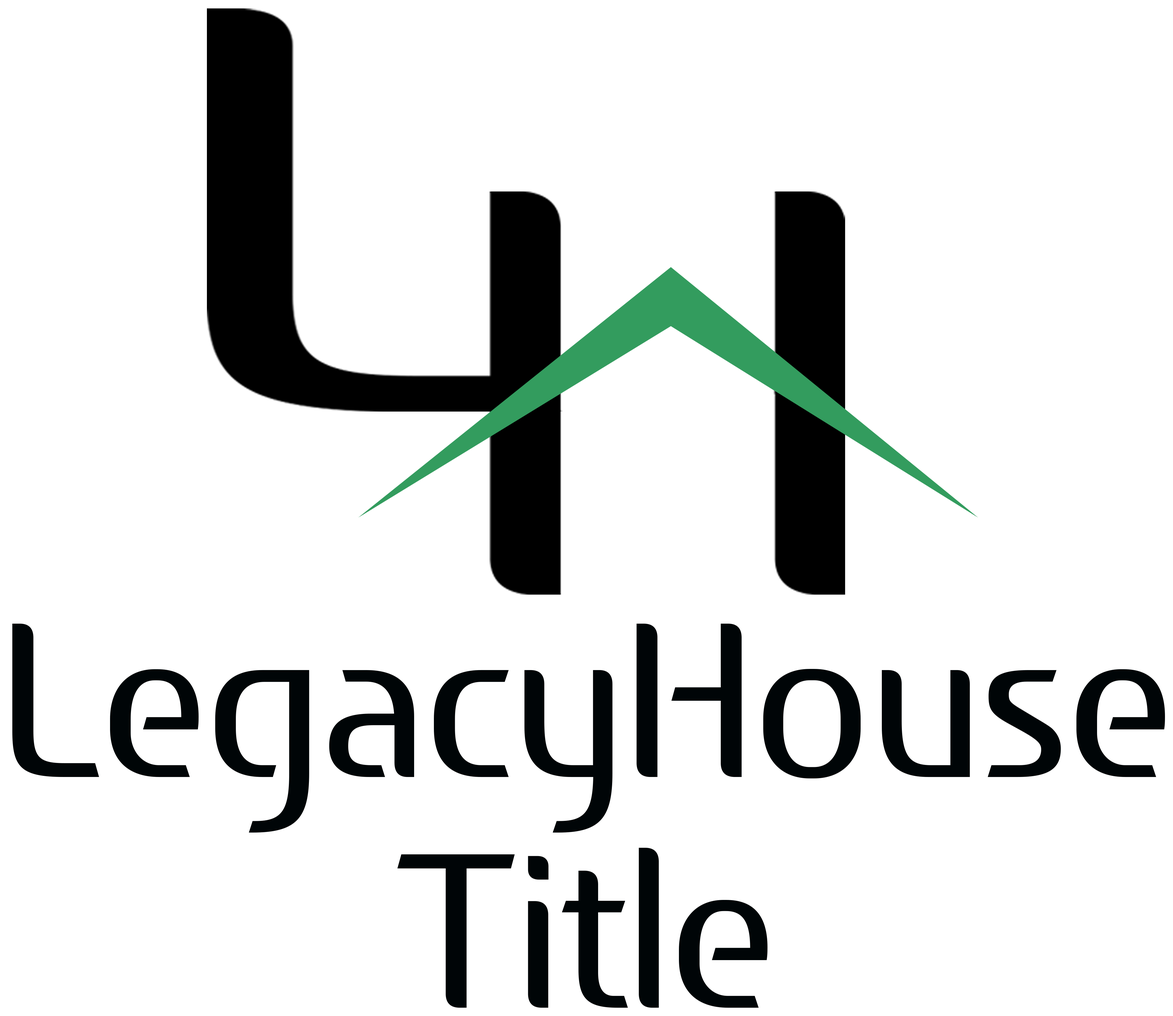
<style>
.page{position:relative;width:1173px;height:1016px;background:#ffffff}
.page>*{position:absolute;margin:0}
.t1{font:226.8px "AfterHeadlineLight";color:#000507;scale:0.91 1}
</style>
<div class="page">
<p class="t1" style="left:12px;top:624px;width:1153px;height:209px">LegacyHouse</p>
<p class="t1" style="left:397px;top:848px;width:371px;height:160px">Title</p>
</div>
